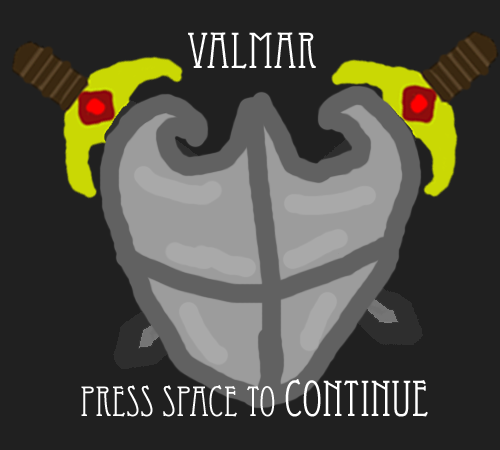
<style>
.page{position:relative;width:500px;height:450px;background:#202020}
.page>*{position:absolute;margin:0}
.t1{font:49.8px "EccentricStd";color:#ffffff}
.t2{font:41.5px "EccentricStd";color:#ffffff}
</style>
<div class="page">
<p class="t1" style="left:188px;top:32px;width:128px;height:37px">Valmar</p>
<p class="t2" style="left:81px;top:379px;width:347px;height:38px">Press Space to <span class="t1">Continue</span></p>
</div>
